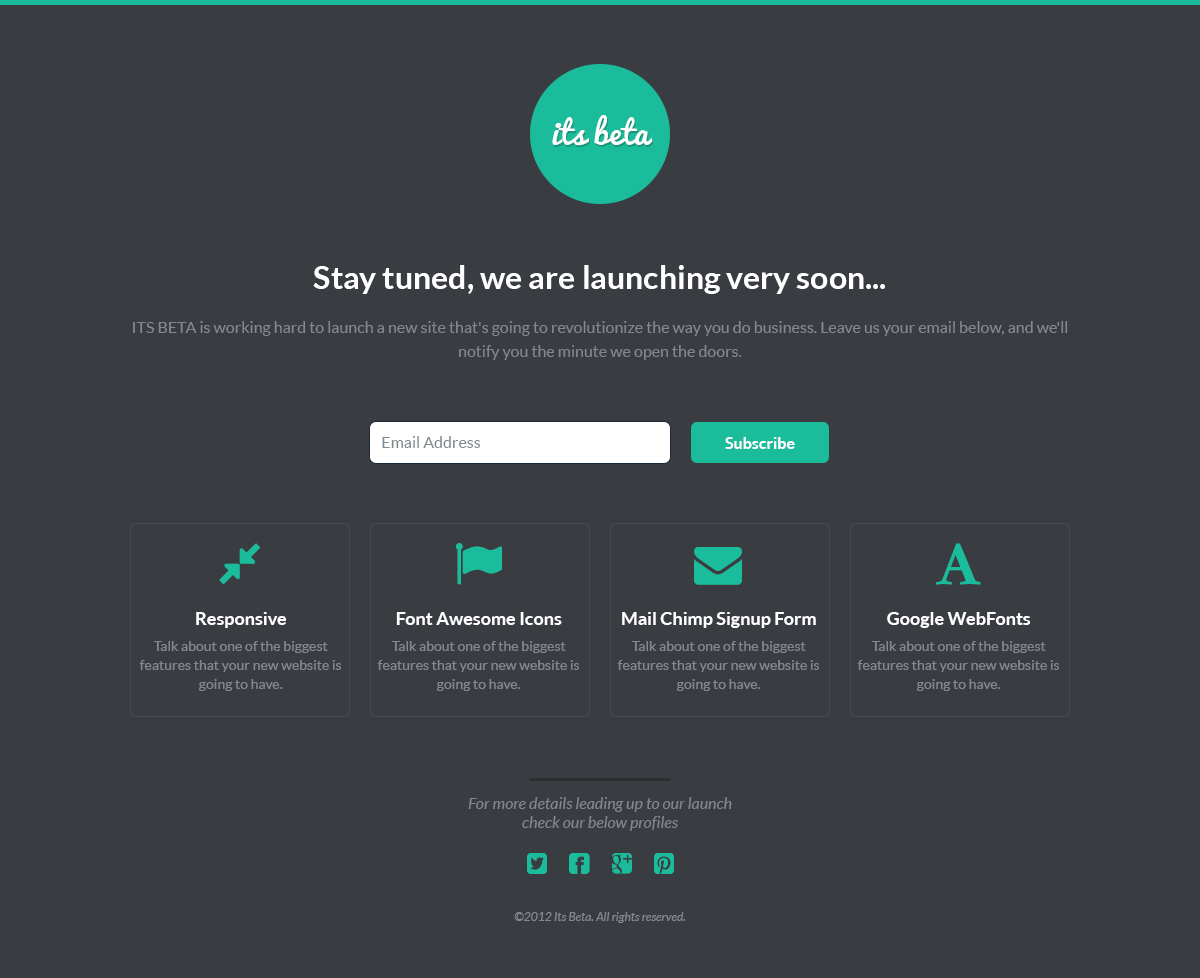
<style>
.page{position:relative;width:1200px;height:978px;background:#393c41}
.page>*{position:absolute;margin:0}
.t1{font:32px "Pacifico";color:#ffffff}
.t2{font:32px "Lato-Bold";color:#ffffff}
.t3{font:16px/24px "Lato-Regular";color:#86878c}
.t4{font:16px "Lato-Regular";color:#7f8c8d}
.t5{font:16px "Lato-Bold";color:#ffffff}
.t6{font:18px "Lato-Bold";color:#ffffff}
.t7{font:14px/19px "Lato-Regular";color:#86878c}
.t8{font:16px/19px "Lato-Italic";color:#86878c}
.t9{font:12px "Lato-Italic";color:#86878c}
</style>
<div class="page">
<p class="t1" style="left:552px;top:115px;width:101px;height:31px">its beta</p>
<p class="t2" style="left:313px;top:265px;width:572px;height:29px">Stay tuned, we are launching very soon...</p>
<p class="t3" style="left:133px;top:321px;width:935px;height:39px;text-align:center">ITS BETA is working hard to launch a new site that's going to revolutionize the way you do business. Leave us your email below, and we'll notify you the minute we open the doors.</p>
<p class="t4" style="left:382px;top:436px;width:99px;height:12px">Email Address</p>
<p class="t5" style="left:725px;top:437px;width:70px;height:12px">Subscribe</p>
<p class="t6" style="left:196px;top:612px;width:91px;height:16px">Responsive</p>
<p class="t6" style="left:396px;top:612px;width:166px;height:13px">Font Awesome Icons</p>
<p class="t6" style="left:622px;top:612px;width:194px;height:16px">Mail Chimp Signup Form</p>
<p class="t6" style="left:887px;top:612px;width:144px;height:16px">Google WebFonts</p>
<p class="t7" style="left:139px;top:641px;width:203px;height:50px;text-align:center">Talk about one of the biggest features that your new website is going to have.</p>
<p class="t7" style="left:377px;top:641px;width:203px;height:50px;text-align:center">Talk about one of the biggest features that your new website is going to have.</p>
<p class="t7" style="left:617px;top:641px;width:203px;height:50px;text-align:center">Talk about one of the biggest features that your new website is going to have.</p>
<p class="t7" style="left:857px;top:641px;width:203px;height:50px;text-align:center">Talk about one of the biggest features that your new website is going to have.</p>
<p class="t8" style="left:468px;top:797px;width:264px;height:34px;text-align:center">For more details leading up to our launch <br>check our below profiles</p>
<p class="t9" style="left:514px;top:912px;width:172px;height:11px">©2012 Its Beta. All rights reserved.</p>
</div>
